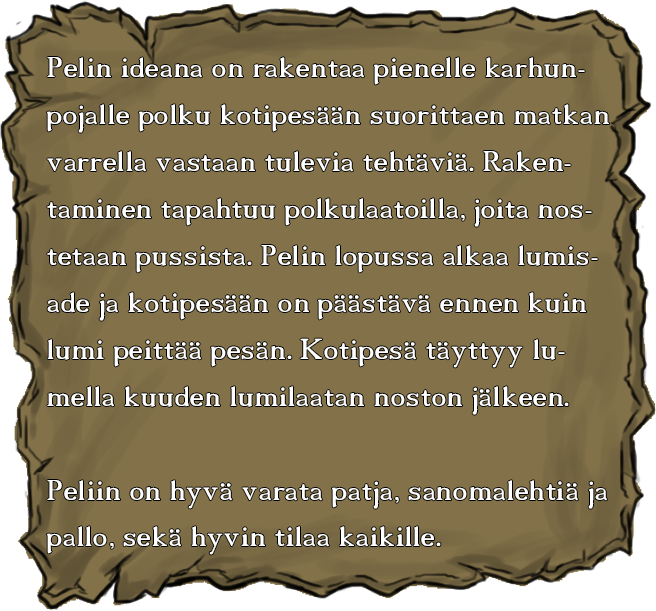
<style>
.page{position:relative;width:656px;height:611px;background:#827149}
.page>*{position:absolute;margin:0}
.t1{font:39.1px "18thCentury";color:#ffffff}
</style>
<div class="page">
<p class="t1" style="left:47px;top:57px;width:562px;height:498px">Pelin ideana on rakentaa pienelle karhunpojalle polku kotipesään suorittaen matkan varrella vastaan tulevia tehtäviä. Rakentaminen tapahtuu polkulaatoilla, joita nostetaan pussista. Pelin lopussa alkaa lumisade ja kotipesään on päästävä ennen kuin lumi peittää pesän. Kotipesä täyttyy lumella kuuden lumilaatan noston jälkeen.<br><br>Peliin on hyvä varata patja, sanomalehtiä ja pallo, sekä hyvin tilaa kaikille.</p>
</div>
